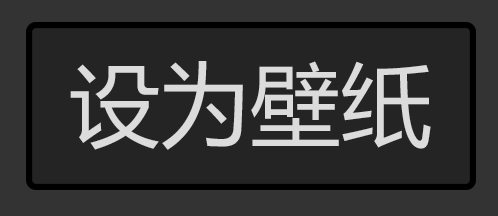
<style>
.page{position:relative;width:498px;height:216px;background:#242424}
.page>*{position:absolute;margin:0}
.t1{font:90.6px "MicrosoftYaHei";color:#dcdcdc}
</style>
<div class="page">
<p class="t1" style="left:70px;top:61px;width:361px;height:89px">设为壁纸</p>
</div>
